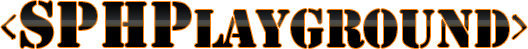
<style>
.page{position:relative;width:528px;height:49px;background:#ffffff}
.page>*{position:absolute;margin:0}
.t1{font:50px "StencilStd";color:#000000}
.t2{font:60px "TempusSansITC";color:#000000}
.t3{font:60px "StencilStd";color:#000000}
</style>
<div class="page">
<p class="t1" style="left:1px;top:1px;width:526px;height:47px"><span class="t2">&lt;</span><span class="t3">SPHP</span>layground<span class="t2">&gt;</span></p>
</div>
